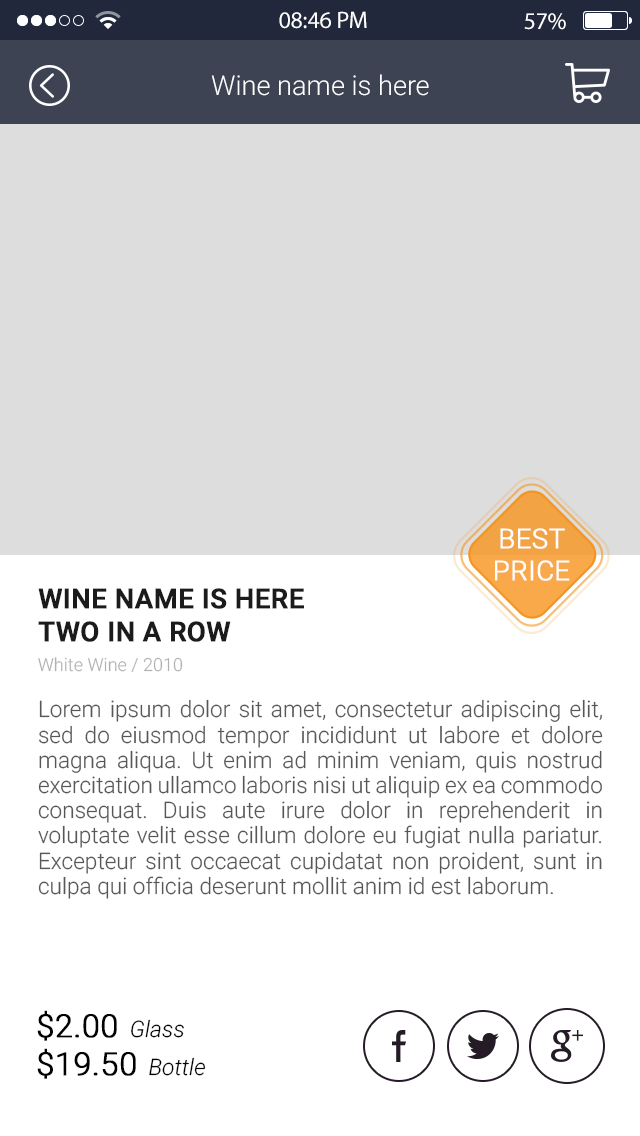
<style>
.page{position:relative;width:640px;height:1136px;background:#ffffff}
.page>*{position:absolute;margin:0}
.t1{font:24px "MyriadPro-Regular";color:#fefeff}
.t2{font:24px "MyriadPro-Regular";color:#ffffff}
.t3{font:27.2px "Roboto-Light";color:#ffffff}
.t4{font:27.2px "Roboto-Light";color:#ffffff;text-transform:uppercase;font-weight:bold}
.t5{font:27.2px/33.6px "Roboto-Medium";color:#1b1b1b;text-transform:uppercase;font-weight:bold}
.t6{font:18.1px "Roboto-Light";color:#b1b1b1}
.t7{font:22.6px/25.2px "Roboto-Light";color:#575757}
.t8{font:31.9px "Roboto-Light";color:#000000;font-weight:bold}
.t9{font:22.8px "Roboto-LightItalic";color:#000000}
</style>
<div class="page">
<p class="t1" style="left:279px;top:11px;width:88px;height:18px">08:46 PM</p>
<p class="t2" style="left:524px;top:13px;width:42px;height:17px">57%</p>
<p class="t3" style="left:211px;top:74px;width:218px;height:22px">Wine name is here</p>
<p class="t4" style="left:495px;top:528px;width:75px;height:53px;text-align:center">best<br>Price</p>
<p class="t5" style="left:38px;top:588px;width:266px;height:54px">Wine Name is Here<br>two in a row</p>
<p class="t6" style="left:38px;top:657px;width:145px;height:16px">White Wine / 2010</p>
<p class="t7" style="left:38px;top:699px;width:565px;height:200px;text-align:justify">Lorem ipsum dolor sit amet, consectetur adipiscing elit, sed do eiusmod tempor incididunt ut labore et dolore magna aliqua. Ut enim ad minim veniam, quis nostrud exercitation ullamco laboris nisi ut aliquip ex ea commodo consequat. Duis aute irure dolor in reprehenderit in voluptate velit esse cillum dolore eu fugiat nulla pariatur. Excepteur sint occaecat cupidatat non proident, sunt in culpa qui officia deserunt mollit anim id est laborum.</p>
<p class="t8" style="left:37px;top:1010px;width:147px;height:31px">$2.00<span class="t9">  Glass</span></p>
<p class="t8" style="left:37px;top:1048px;width:169px;height:31px">$19.50<span class="t9">  Bottle</span></p>
</div>
